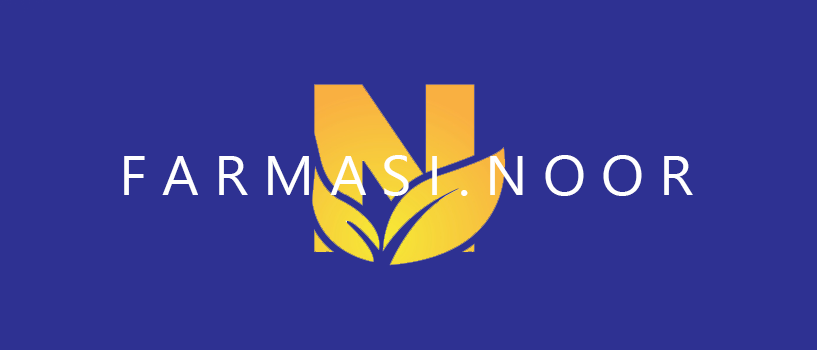
<style>
.page{position:relative;width:817px;height:350px;background:#2e3192}
.page>*{position:absolute;margin:0}
.t1{font:56.3px "SegoeUI";color:#ffffff}
</style>
<div class="page">
<p class="t1" style="left:124px;top:155px;width:569px;height:41px">F A R M A S I . N O O R</p>
</div>
